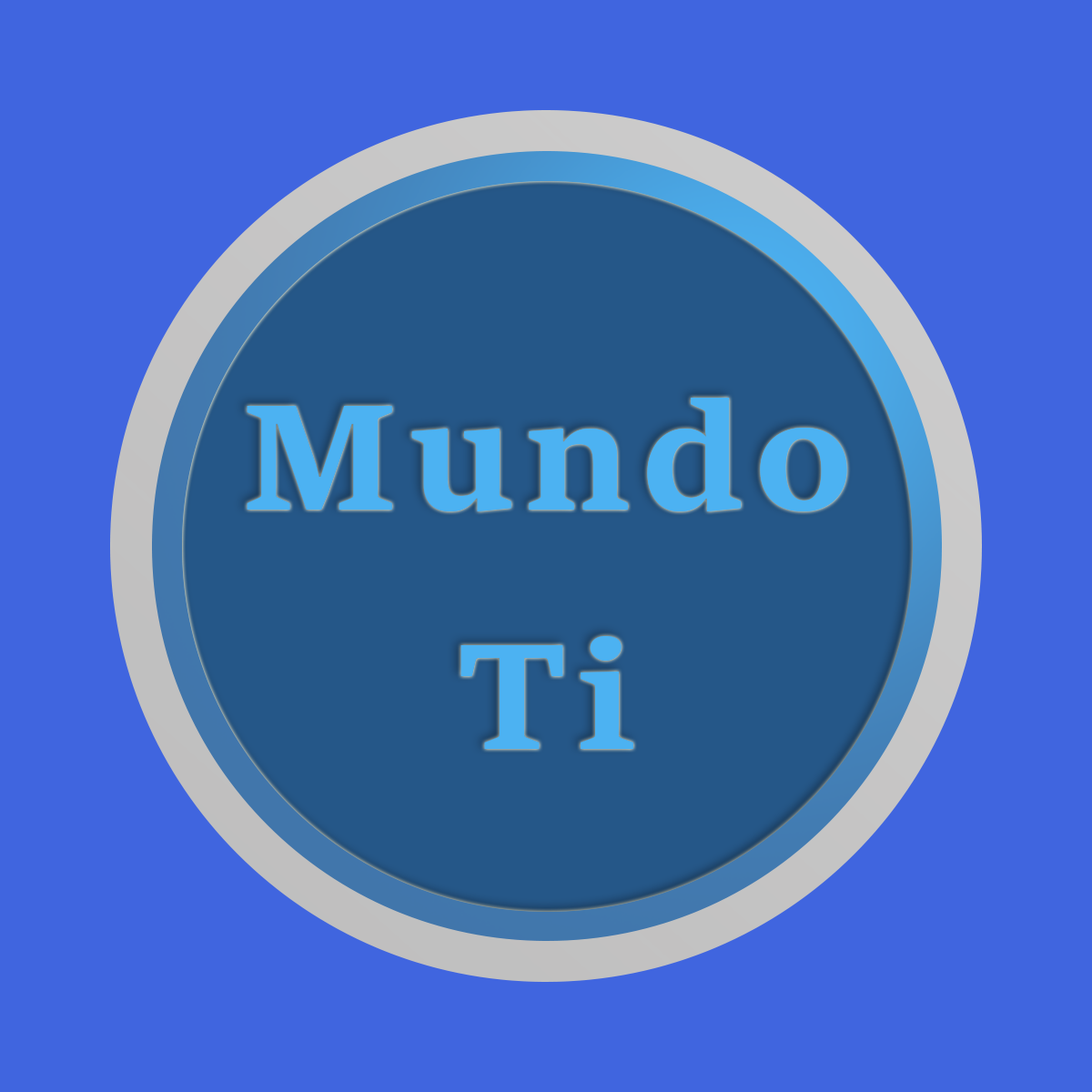
<style>
.page{position:relative;width:1092px;height:1092px;background:#4065df}
.page>*{position:absolute;margin:0}
.t1{font:157.8px/119.6px "SitkaSmall-Bold";letter-spacing:0.05em;color:#4cb2f2}
</style>
<div class="page">
<p class="t1" style="left:247px;top:398px;width:600px;height:351px;text-align:center">Mundo<br><br>Ti</p>
</div>
